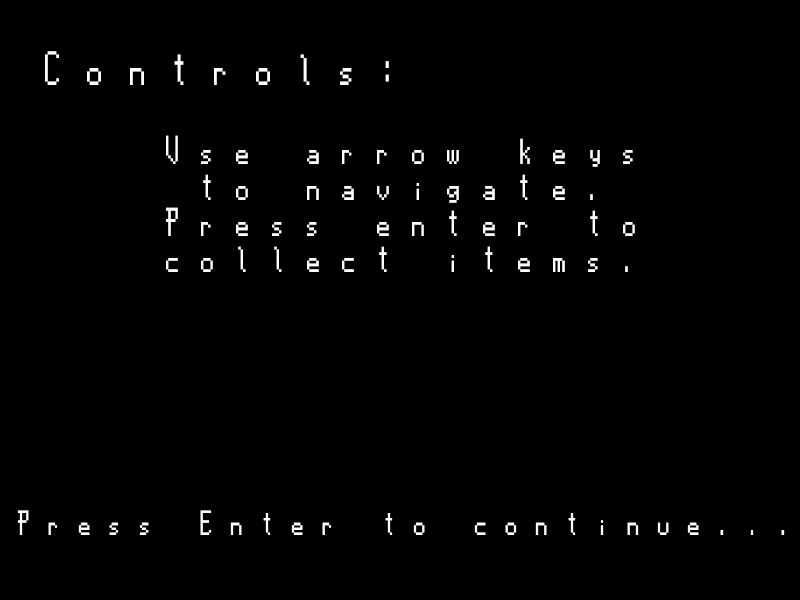
<style>
.page{position:relative;width:800px;height:600px;background:#000000}
.page>*{position:absolute;margin:0}
.t1{font:36px "RMG2000";color:#ffffff}
.t2{font:30px "RMG2000";color:#ffffff}
.t3{font:26px "RMG2000";color:#ffffff}
</style>
<div class="page">
<p class="t1" style="left:45px;top:51px;width:344px;height:34px">Controls:</p>
<p class="t2" style="left:166px;top:135px;width:469px;height:137px;text-align:center">Use arrow keys<br>to navigate.<br>Press enter to<br>collect items.</p>
<p class="t3" style="left:17px;top:510px;width:768px;height:25px">Press Enter to continue...</p>
</div>
